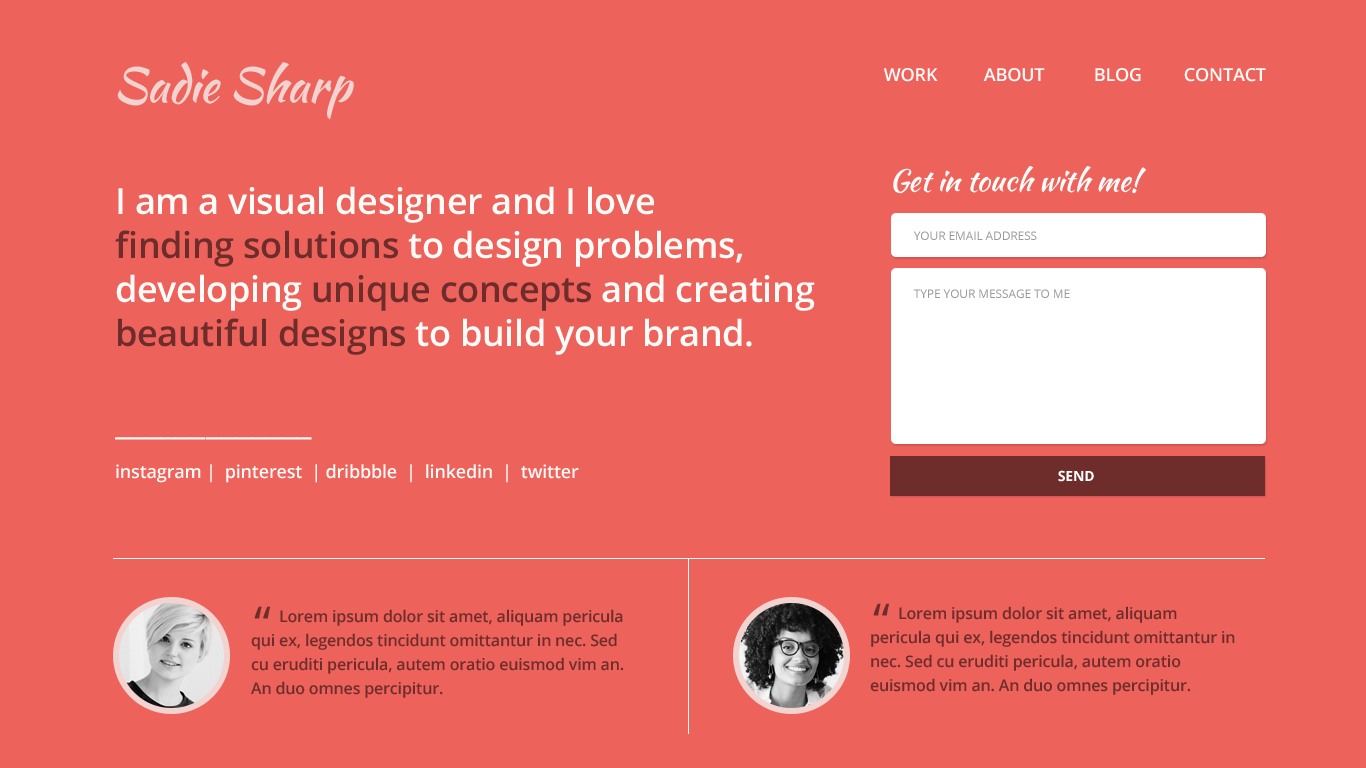
<style>
.page{position:relative;width:1366px;height:768px;background:#ee625c}
.page>*{position:absolute;margin:0}
.t1{font:48px "KaushanScript-Regular";letter-spacing:-0.01em;color:#f2d3cf}
.t2{font:18px "OpenSans-Semibold";letter-spacing:-0.01em;color:#fffbf8}
.t3{font:30px "KaushanScript-Regular";letter-spacing:-0.01em;color:#fffbf8}
.t4{font:18px/44px "OpenSans-Semibold";letter-spacing:-0.01em;color:#fffbf8}
.t5{font:36px/44px "OpenSans-Semibold";letter-spacing:-0.01em;color:#fffbf8;text-transform:uppercase}
.t6{font:36px/44px "OpenSans-Semibold";letter-spacing:-0.01em;color:#fffbf8}
.t7{font:36px/44px "OpenSans-Semibold";letter-spacing:-0.01em;color:#6e2d2b}
.t8{font:12px "OpenSans";letter-spacing:-0.01em;color:#999999;text-transform:uppercase}
.t9{font:14px "OpenSans-Bold";letter-spacing:-0.01em;color:#ffffff}
.t10{font:48px "OpenSans";letter-spacing:-0.01em;color:#6e2d2b}
.t11{font:16px/24px "OpenSans-Semibold";letter-spacing:-0.01em;color:#6e2d2b}
</style>
<div class="page">
<p class="t1" style="left:117px;top:62px;width:237px;height:58px">Sadie Sharp</p>
<p class="t2" style="left:884px;top:68px;width:54px;height:14px">WORK</p>
<p class="t2" style="left:983px;top:68px;width:62px;height:14px">ABOUT</p>
<p class="t2" style="left:1095px;top:68px;width:46px;height:14px">BLOG</p>
<p class="t2" style="left:1184px;top:68px;width:82px;height:14px">CONTACT</p>
<p class="t3" style="left:893px;top:166px;width:253px;height:28px">Get in touch with me!</p>
<p class="t4" style="left:115px;top:186px;width:700px;height:297px"><span class="t5">I </span><span class="t6">am a visual designer and I love <br></span><span class="t7">finding solutions</span><span class="t6"> to design problems, developing </span><span class="t7">unique concepts</span><span class="t6"> and creating </span><span class="t7">beautiful designs</span><span class="t6"> to build your brand.<br><br>_____________<br></span>instagram |  pinterest  | dribbble  |  linkedin  |  twitter</p>
<p class="t8" style="left:913px;top:231px;width:124px;height:9px">YOUR email address</p>
<p class="t8" style="left:913px;top:289px;width:157px;height:9px">Type your message to me</p>
<p class="t9" style="left:1058px;top:470px;width:36px;height:12px">SEND</p>
<p class="t10" style="left:254px;top:606px;width:17px;height:13px">“</p>
<p class="t11" style="left:870px;top:606px;width:365px;height:89px">Lorem ipsum dolor sit amet, aliquam pericula qui ex, legendos tincidunt omittantur in nec. Sed cu eruditi pericula, autem oratio euismod vim an. An duo omnes percipitur.</p>
<p class="t10" style="left:873px;top:603px;width:17px;height:13px">“</p>
<p class="t11" style="left:251px;top:609px;width:373px;height:89px">Lorem ipsum dolor sit amet, aliquam pericula qui ex, legendos tincidunt omittantur in nec. Sed cu eruditi pericula, autem oratio euismod vim an. An duo omnes percipitur.</p>
</div>
